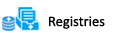
<style>
.page{position:relative;width:140px;height:40px;background:#ffffff}
.page>*{position:absolute;margin:0}
.t1{font:14.6px "Calibri";color:#000000}
</style>
<div class="page">
<p class="t1" style="left:49px;top:16px;width:56px;height:13px">Registries</p>
</div>
